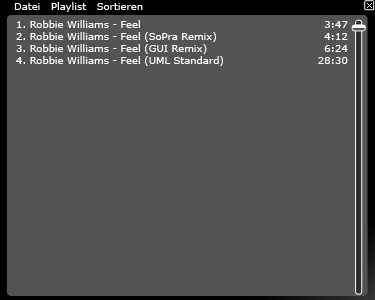
<style>
.page{position:relative;width:375px;height:300px;background:#535353}
.page>*{position:absolute;margin:0}
.t1{font:10px "Verdana";color:#ffffff}
</style>
<div class="page">
<p class="t1" style="left:14px;top:2px;width:129px;height:10px">Datei   Playlist   Sortieren</p>
<p class="t1" style="left:16px;top:20px;width:207px;height:46px">1. Robbie Williams - Feel<br>2. Robbie Williams - Feel (SoPra Remix)<br>3. Robbie Williams - Feel (GUI Remix)<br>4. Robbie Williams - Feel (UML Standard)</p>
<p class="t1" style="left:318px;top:21px;width:30px;height:43px;text-align:right">3:47<br>4:12<br>6:24<br>28:30</p>
</div>
